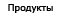
<style>
.page{position:relative;width:58px;height:17px;background:#ffffff}
.page>*{position:absolute;margin:0}
.t1{font:10px "Tahoma";letter-spacing:0.01em;color:#000000}
</style>
<div class="page">
<p class="t1" style="left:8px;top:4px;width:45px;height:9px">Продукты</p>
</div>
